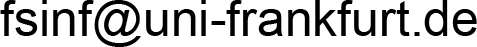
<style>
.page{position:relative;width:477px;height:47px;background:#ffffff}
.page>*{position:absolute;margin:0}
.t1{font:50px "ArialMT";color:#000000}
</style>
<div class="page">
<p class="t1" style="left:0px;top:0px;width:477px;height:47px">fsinf@uni-frankfurt.de</p>
</div>
